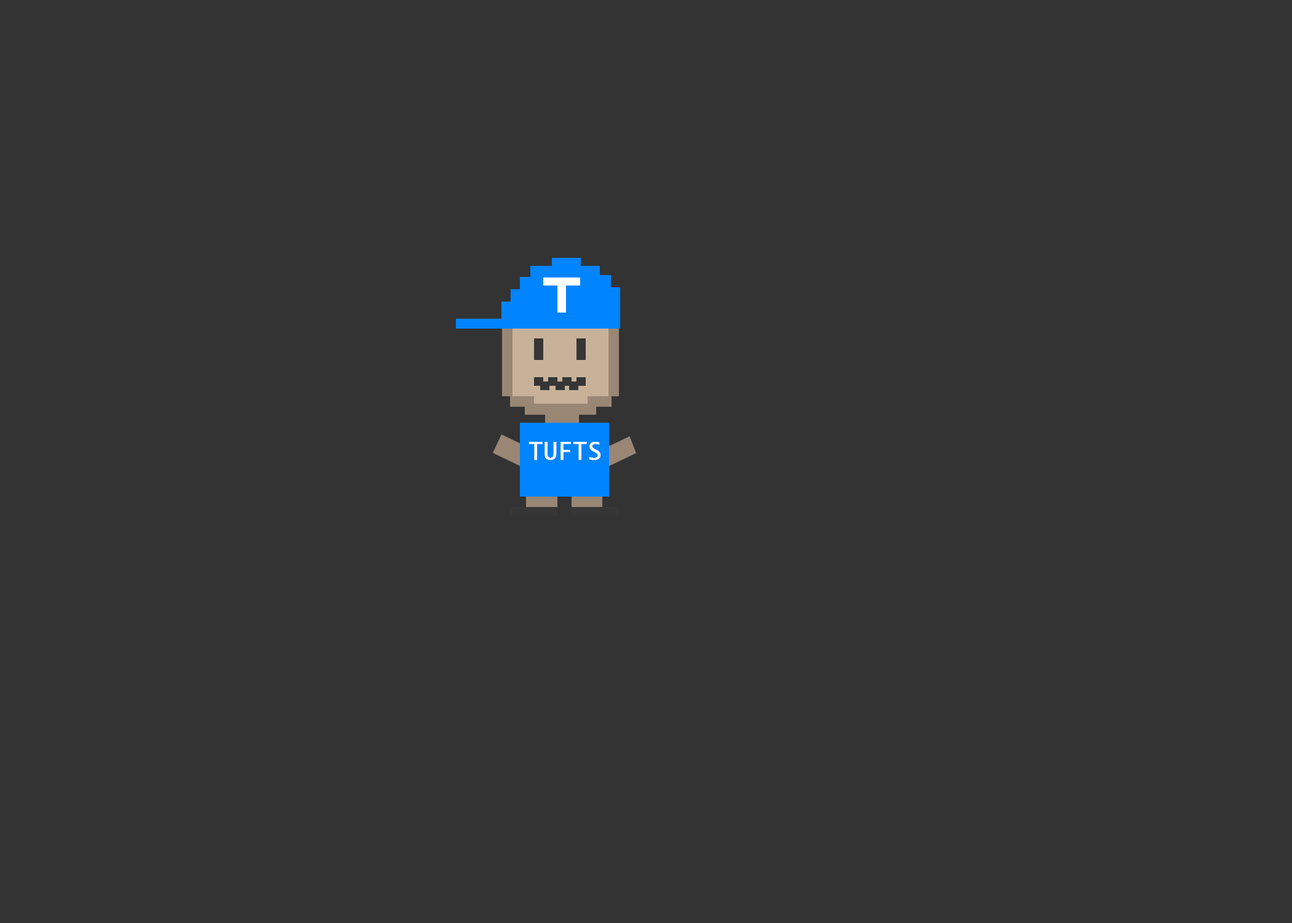
<style>
.page{position:relative;width:1292px;height:923px;background:#333333}
.page>*{position:absolute;margin:0}
.t1{font:23.1px "Monaco";letter-spacing:0.012em;color:#ffffff;font-weight:bold}
</style>
<div class="page">
<p class="t1" style="left:529px;top:442px;width:72px;height:18px">TUFTS</p>
</div>
